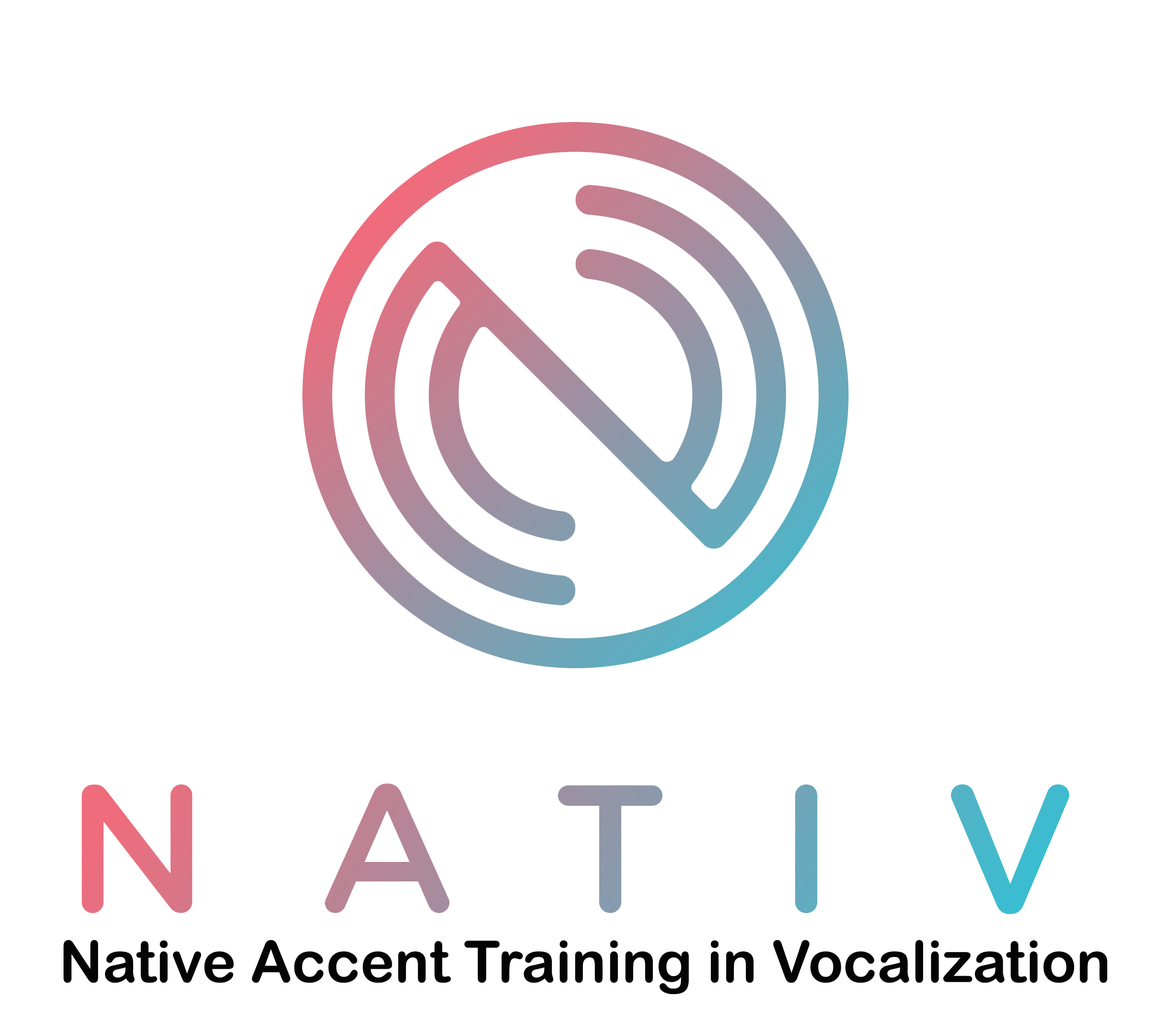
<style>
.page{position:relative;width:1151px;height:1036px;background:#ffffff}
.page>*{position:absolute;margin:0}
.t1{font:57.6px "ArialRoundedMTBold";color:#040404}
</style>
<div class="page">
<p class="t1" style="left:64px;top:940px;width:1043px;height:54px">Native Accent Training in Vocalization</p>
</div>
